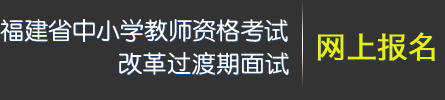
<style>
.page{position:relative;width:445px;height:100px;background:#333333}
.page>*{position:absolute;margin:0}
.t1{font:24px "FZY3JW--GB1-0";color:#ffffff}
.t2{font:30px "HiraginoSansGB-W3";color:#edf000;font-weight:bold}
.t3{font:24px "FZY3JW--GB1-0";letter-spacing:0.02em;color:#ffffff}
</style>
<div class="page">
<p class="t1" style="left:0px;top:18px;width:288px;height:24px">福建省中小学教师资格考试</p>
<p class="t2" style="left:317px;top:32px;width:118px;height:29px">网上报名</p>
<p class="t3" style="left:119px;top:51px;width:170px;height:24px">改革过渡期面试</p>
</div>
